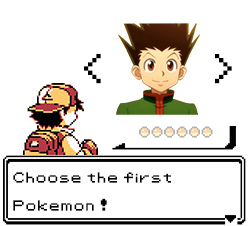
<style>
.page{position:relative;width:250px;height:226px;background:#ffffff}
.page>*{position:absolute;margin:0}
.t1{font:33.3px "Pokemon-Classic";color:#000000}
.t2{font:11.7px "Pokemon-Classic";color:#000000}
</style>
<div class="page">
<p class="t1" style="left:84px;top:54px;width:17px;height:30px">&lt;</p>
<p class="t1" style="left:215px;top:54px;width:17px;height:30px">&gt;</p>
<p class="t2" style="left:13px;top:172px;width:158px;height:39px">Choose the first <br><br>Pokemon !</p>
</div>
